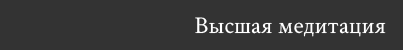
<style>
.page{position:relative;width:403px;height:50px;background:#333333}
.page>*{position:absolute;margin:0}
.t1{font:24px "CrimsonText-Regular";color:#ffffff}
</style>
<div class="page">
<p class="t1" style="left:195px;top:17px;width:191px;height:20px">Высшая медитация</p>
</div>
